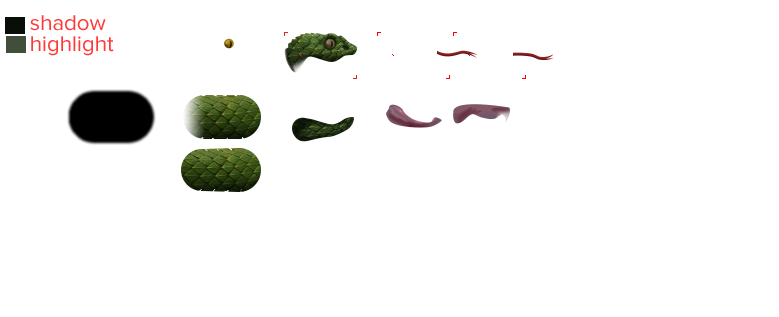
<style>
.page{position:relative;width:779px;height:317px;background:#ffffff}
.page>*{position:absolute;margin:0}
.t1{font:22.2px "ProximaNova-Regular";color:#ff3838}
</style>
<div class="page">
<p class="t1" style="left:30px;top:15px;width:76px;height:16px">shadow</p>
<p class="t1" style="left:31px;top:36px;width:83px;height:20px">highlight</p>
</div>
